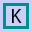
<style>
.page{position:relative;width:32px;height:32px;background:#c8cff9}
.page>*{position:absolute;margin:0}
.t1{font:20px "MyriadPro-Regular";color:#000000}
</style>
<div class="page">
<p class="t1" style="left:12px;top:9px;width:10px;height:14px">K</p>
</div>
